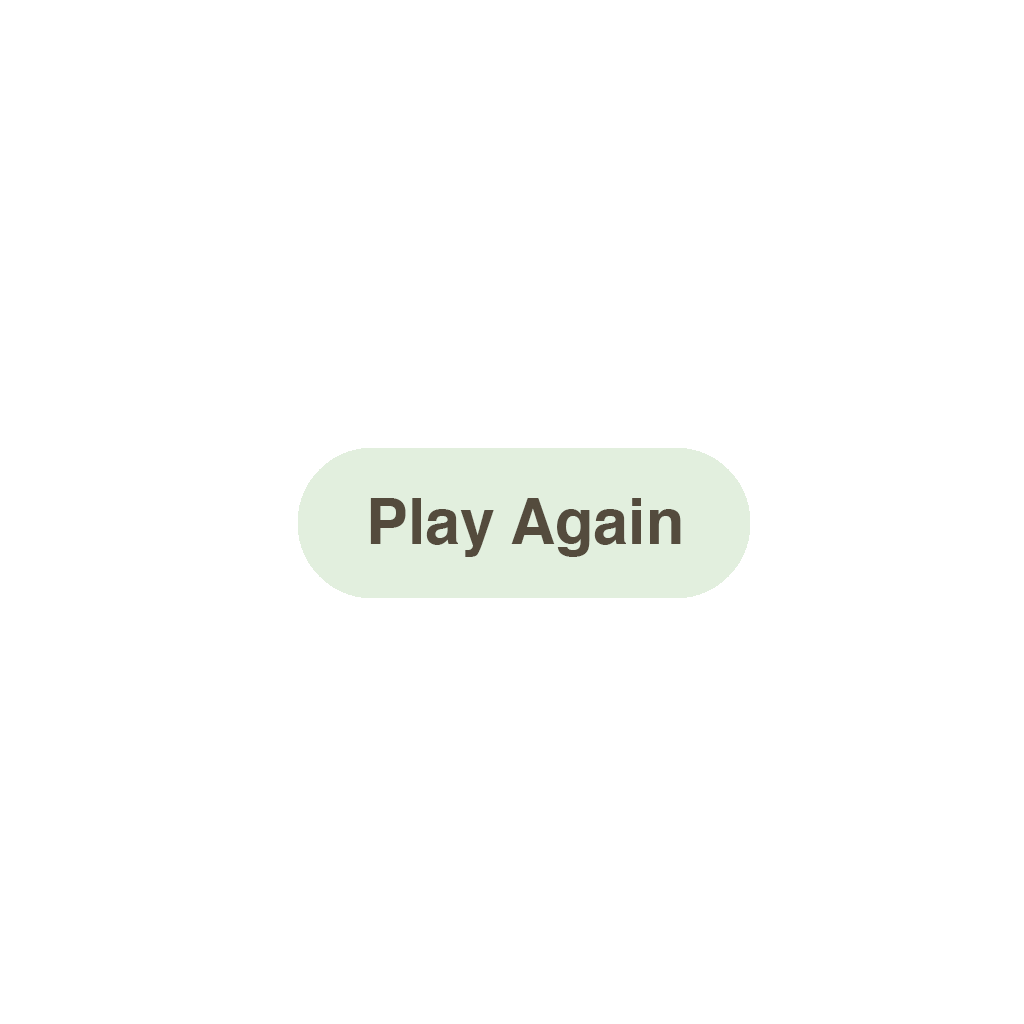
<style>
.page{position:relative;width:1024px;height:1024px;background:#ffffff}
.page>*{position:absolute;margin:0}
.t1{font:63.4px "Helvetica-Bold";color:#544b3d}
</style>
<div class="page">
<p class="t1" style="left:370px;top:498px;width:311px;height:59px">Play Again</p>
</div>
